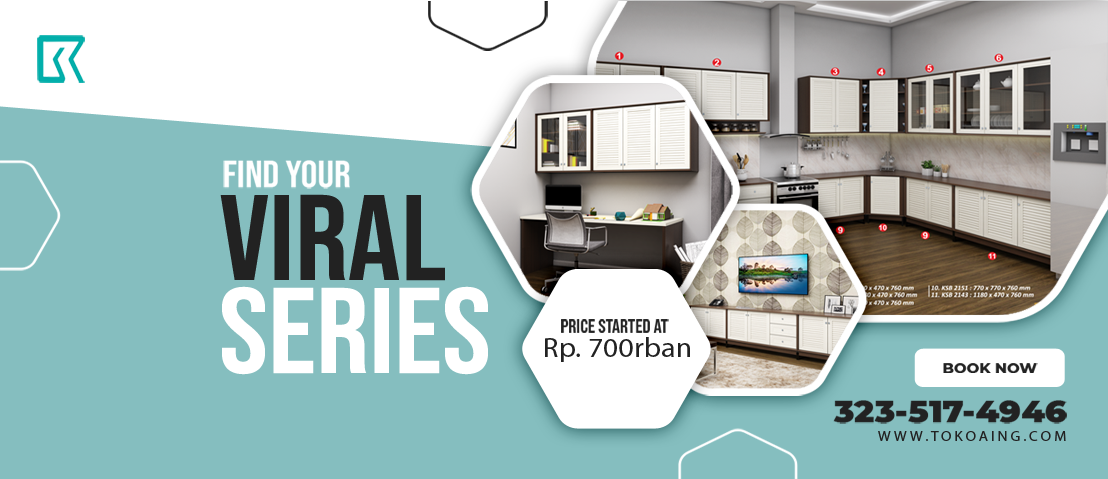
<style>
.page{position:relative;width:1108px;height:479px;background:#85bebf}
.page>*{position:absolute;margin:0}
.t1{font:37.9px "BebasNeue-Regular";color:#ffffff;text-transform:uppercase;scale:1.09 1}
.t2{font:121.3px "BebasNeue-Regular";color:#222222;text-transform:uppercase;scale:1.09 1}
.t3{font:121.3px "BebasNeue-Regular";color:#ffffff;text-transform:uppercase;scale:1.09 1}
.t4{font:18.4px "BebasNeue-Regular";color:#222222;scale:1.09 1}
.t5{font:27.6px "MyriadPro-Regular";color:#222222;scale:1.09 1}
.t6{font:13.8px "Montserrat-ExtraBold";color:#222222;text-transform:uppercase;scale:1.09 1}
.t7{font:30.7px "Montserrat-Black";color:#222222;scale:1.09 1}
.t8{font:13.8px "MyriadPro-Regular";letter-spacing:0.2em;color:#222222;text-transform:uppercase;scale:1.09 1}
</style>
<div class="page">
<p class="t1" style="left:223px;top:160px;width:127px;height:29px">Find Your</p>
<p class="t2" style="left:220px;top:194px;width:225px;height:87px">VIRAL</p>
<p class="t3" style="left:222px;top:286px;width:266px;height:89px">SERIES</p>
<p class="t4" style="left:561px;top:319px;width:108px;height:14px">Price Started At</p>
<p class="t5" style="left:545px;top:337px;width:145px;height:25px">Rp. 700rban</p>
<p class="t6" style="left:943px;top:363px;width:95px;height:10px">Book Now</p>
<p class="t7" style="left:833px;top:400px;width:234px;height:24px">323-517-4946</p>
<p class="t8" style="left:878px;top:431px;width:188px;height:10px">www.TOKOAING.com</p>
</div>
